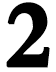
<style>
.page{position:relative;width:56px;height:72px;background:#ffffff}
.page>*{position:absolute;margin:0}
.t1{font:98px "2.0-";color:#000000;font-weight:bold}
</style>
<div class="page">
<p class="t1" style="left:6px;top:2px;width:44px;height:66px">2</p>
</div>
